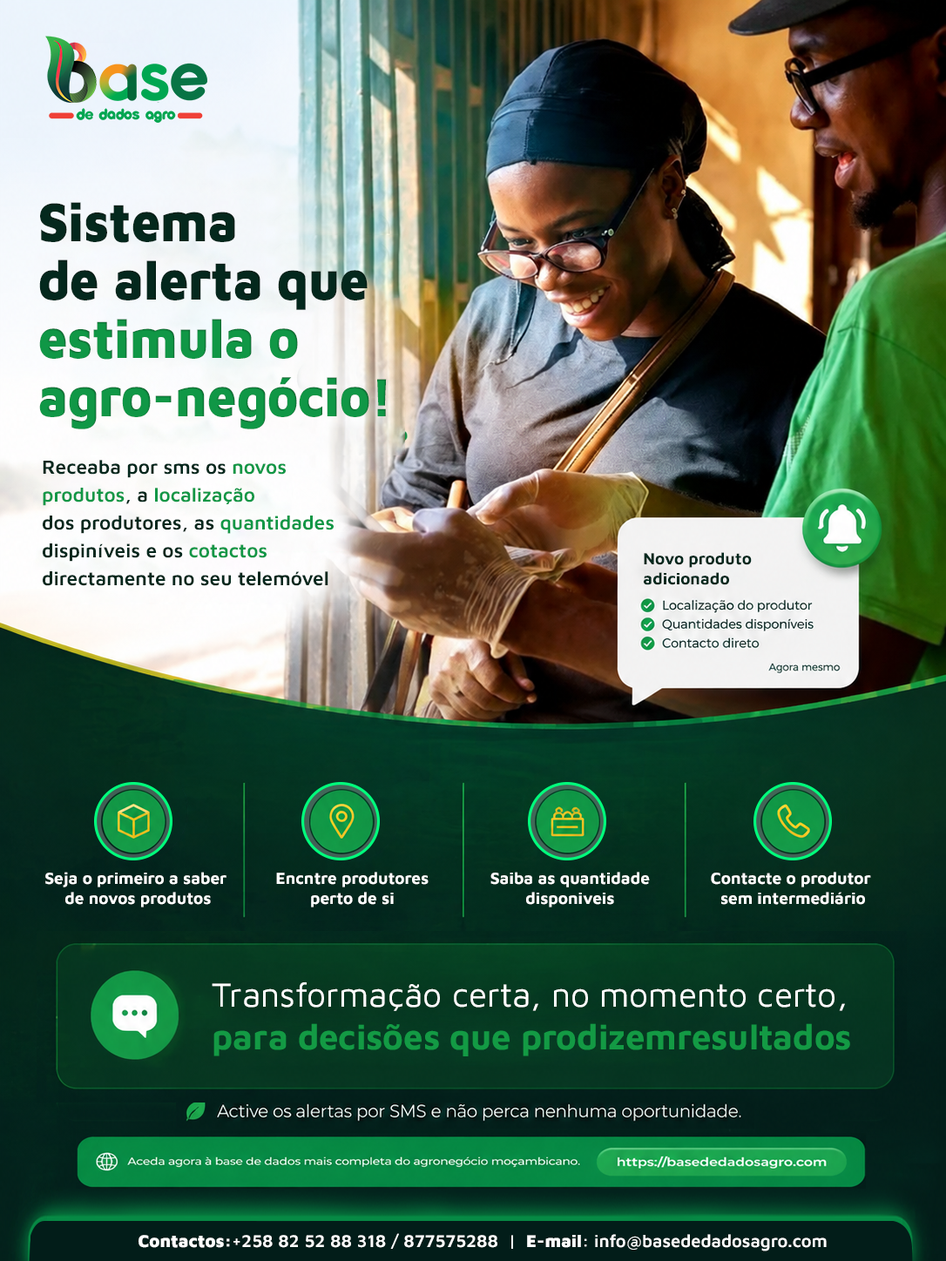
<style>
.page{position:relative;width:946px;height:1261px}
.page>*{position:absolute;margin:0}
.t1{font:55.4px/58.3px "MavenPro-Black";color:#109746;scale:0.92 1}
.t2{font:55.4px/58.3px "MavenPro-Black";color:#04281d;scale:0.92 1}
.t3{font:19.7px/27.9px "MavenPro-SemiBold";color:#04281d}
.t4{font:19.7px/27.9px "MavenPro-SemiBold";color:#109746}
.t5{font:16.5px "MavenPro-Bold";color:#02281d}
.t6{font:16.5px "MavenPro-Bold";color:#ffffff}
.t7{font:34.5px "MavenPro-Regular";color:#ffffff}
.t8{font:35.7px "MavenPro-Bold";color:#139a44}
.t9{font:17.6px "MavenPro-SemiBold";color:#ffffff}
.t10{font:17.6px "MavenPro-Black";color:#ffffff}
</style>
<div class="page">
<p class="t1" style="left:39px;top:202px;width:348px;height:227px"><span class="t2">Sistema <br>de alerta que <br></span>estimula o<br>agro-negócio!</p>
<p class="t3" style="left:43px;top:460px;width:291px;height:126px">Receaba por sms os <span class="t4">novos <br>produtos</span>, a <span class="t4">localização<br></span>dos produtores, as <span class="t4">quantidades</span> <br>dispiníveis e os <span class="t4">cotactos<br></span>directamente no seu telemóvel</p>
<p class="t5" style="left:644px;top:552px;width:107px;height:33px">Novo produto<br>adicionado</p>
<p class="t6" style="left:45px;top:872px;width:181px;height:35px;text-align:center">Seja o primeiro a saber <br>de novos produtos</p>
<p class="t6" style="left:276px;top:872px;width:152px;height:35px;text-align:center">Encntre produtores<br>perto de si</p>
<p class="t6" style="left:490px;top:872px;width:160px;height:35px;text-align:center">Saiba as quantidade<br>disponiveis</p>
<p class="t6" style="left:711px;top:872px;width:160px;height:33px;text-align:center">Contacte o produtor <br>sem intermediário</p>
<p class="t7" style="left:212px;top:981px;width:638px;height:75px">Transformação certa, no momento certo,<br><span class="t8">para decisões que prodizemresultados</span></p>
<p class="t9" style="left:138px;top:1233px;width:688px;height:18px"><span class="t10">Contactos:</span>+258 82 52 88 318 / 877575288  |  <span class="t10">E-mail</span>: info@basededadosagro.com</p>
</div>
